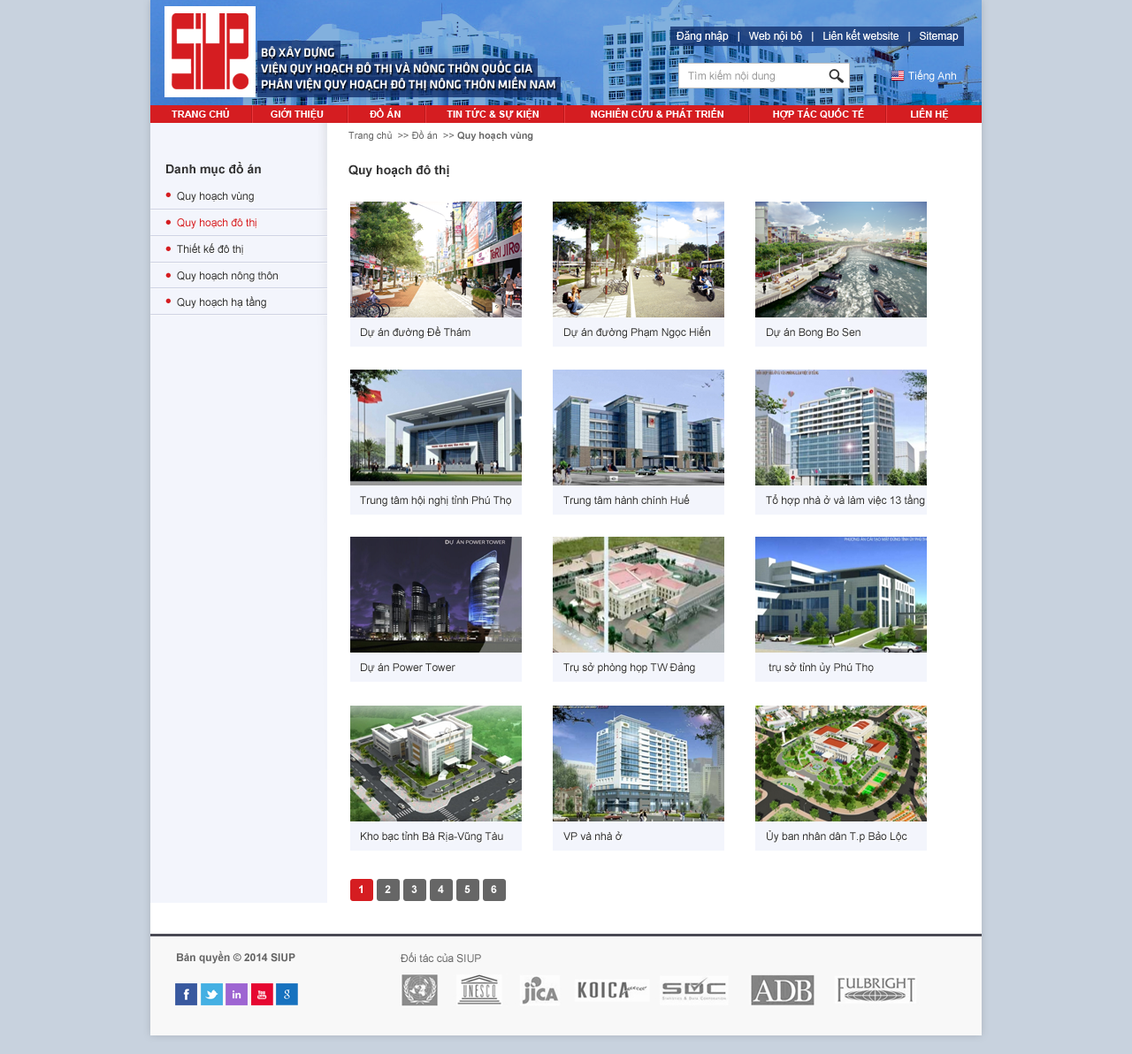
<style>
.page{position:relative;width:1132px;height:1054px;background:#c8d2de}
.page>*{position:absolute;margin:0}
.t1{font:9.7px "ArialMT";color:#666666}
.t2{font:9.7px "Arial-BoldMT";color:#666666}
.t3{font:12.4px "Arial-BoldMT";color:#333333}
.t4{font:10.6px/26.5px "ArialMT";color:#333333}
.t5{font:10.6px/26.5px "ArialMT";color:#d51d21}
.t6{font:10.6px "ArialMT";color:#333333}
.t7{font:10.6px "Arial-BoldMT";color:#ffffff}
.t8{font:10.6px "Arial-BoldMT";color:#666666}
.t9{font:10.6px "ArialMT";color:#666666}
</style>
<div class="page">
<p class="t1" style="left:348px;top:130px;width:185px;height:11px">Trang chủ  &gt;&gt; Đồ án  &gt;&gt; <span class="t2">Quy hoạch vùng</span></p>
<p class="t3" style="left:166px;top:162px;width:95px;height:14px">Danh mục đồ án</p>
<p class="t3" style="left:348px;top:164px;width:101px;height:13px">Quy hoạch đô thị</p>
<p class="t4" style="left:177px;top:192px;width:101px;height:117px">Quy hoạch vùng<br><span class="t5">Quy hoạch đô thị<br></span>Thiết kế đô thị<br>Quy hoạch nông thôn<br>Quy hoạch hạ tầng</p>
<p class="t6" style="left:361px;top:326px;width:109px;height:13px">Dự án đường Đề Thám</p>
<p class="t6" style="left:564px;top:326px;width:146px;height:13px">Dự án đường Phạm Ngọc Hiển</p>
<p class="t6" style="left:766px;top:328px;width:94px;height:11px">Dự án Bong Bo Sen</p>
<p class="t6" style="left:360px;top:495px;width:151px;height:12px">Trung tâm hội nghị tỉnh Phú Thọ</p>
<p class="t6" style="left:563px;top:494px;width:127px;height:13px">Trung tâm hành chính Huế</p>
<p class="t6" style="left:766px;top:494px;width:159px;height:13px">Tổ hợp nhà ở và làm việc 13 tầng</p>
<p class="t6" style="left:361px;top:663px;width:94px;height:10px">Dự án Power Tower</p>
<p class="t6" style="left:563px;top:662px;width:132px;height:12px">Trụ sở phòng họp TW Đảng</p>
<p class="t6" style="left:768px;top:662px;width:105px;height:12px">trụ sở tỉnh ủy Phú Thọ</p>
<p class="t6" style="left:361px;top:831px;width:142px;height:11px">Kho bạc tỉnh Bà Rịa-Vũng Tàu</p>
<p class="t6" style="left:563px;top:831px;width:59px;height:9px">VP và nhà ở</p>
<p class="t6" style="left:766px;top:830px;width:141px;height:12px">Ủy ban nhân dân T.p Bảo Lộc</p>
<p class="t7" style="left:359px;top:885px;width:3px;height:8px">1</p>
<p class="t7" style="left:385px;top:885px;width:6px;height:8px">2</p>
<p class="t7" style="left:411px;top:885px;width:6px;height:8px">3</p>
<p class="t7" style="left:438px;top:885px;width:6px;height:8px">4</p>
<p class="t7" style="left:464px;top:885px;width:6px;height:8px">5</p>
<p class="t7" style="left:491px;top:885px;width:6px;height:8px">6</p>
<p class="t8" style="left:177px;top:950px;width:118px;height:14px">Bản quyền © 2014 SIUP</p>
<p class="t9" style="left:400px;top:952px;width:81px;height:11px">Đối tác của SIUP</p>
</div>
